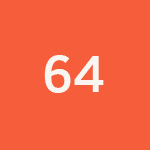
<style>
.page{position:relative;width:150px;height:150px;background:#f65e3b}
.page>*{position:absolute;margin:0}
.t1{font:52.9px "ClearSans-Medium";color:#f9f6f2}
</style>
<div class="page">
<p class="t1" style="left:44px;top:55px;width:60px;height:38px">64</p>
</div>
